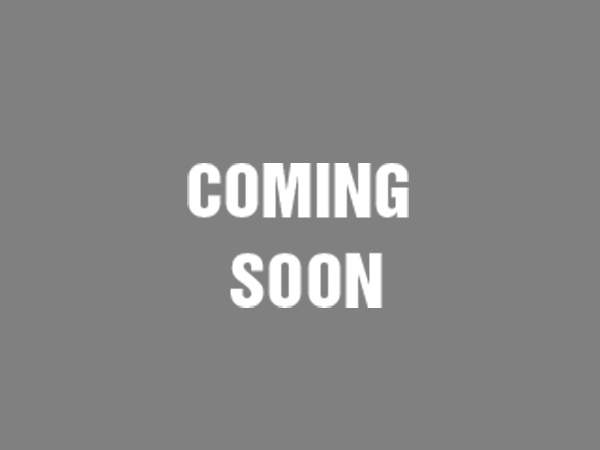
<style>
.page{position:relative;width:600px;height:450px;background:#808080}
.page>*{position:absolute;margin:0}
.t1{font:67.5px/90px "HelveticaInseratCyr-Upright";color:#ffffff}
</style>
<div class="page">
<p class="t1" style="left:187px;top:163px;width:222px;height:145px;text-align:center">COMING<br> SOON</p>
</div>
